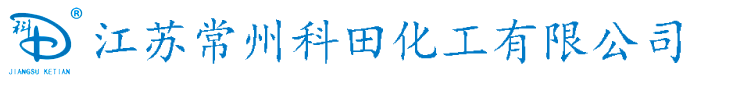
<style>
.page{position:relative;width:750px;height:85px;background:#ffffff}
.page>*{position:absolute;margin:0}
.t1{font:50px "¿¬Ìå";color:#007ac7}
</style>
<div class="page">
<p class="t1" style="left:95px;top:18px;width:587px;height:46px">江苏常州科田化工有限公司</p>
</div>
